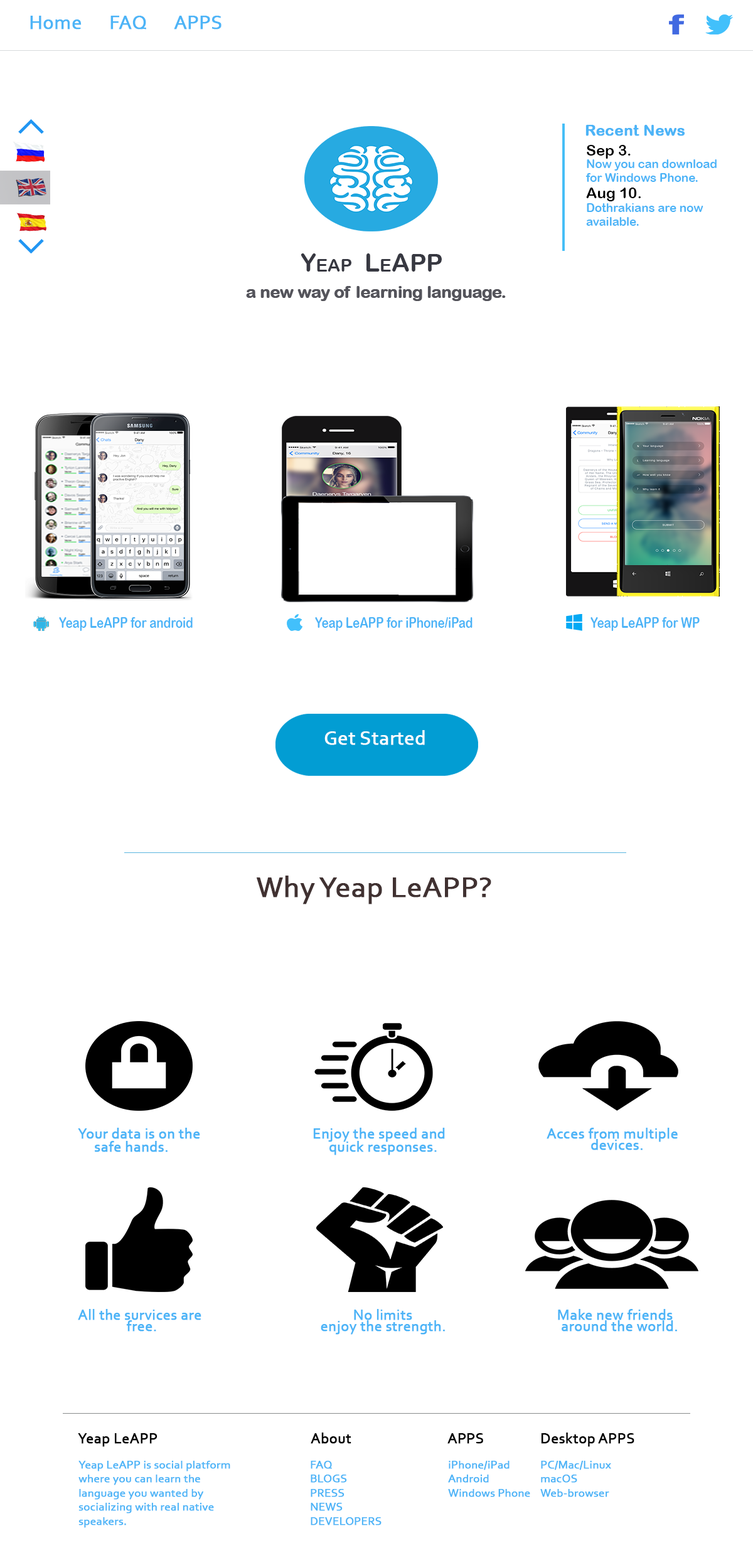
<style>
.page{position:relative;width:753px;height:1568px;background:#ffffff}
.page>*{position:absolute;margin:0}
.t1{font:20.1px "Corbel";color:#4cb4f7;font-weight:bold}
.t2{font:15.1px "ArialRoundedMTBold";color:#4cb4f7;font-weight:bold}
.t3{font:15.1px "ArialRoundedMTBold";color:#000000}
.t4{font:11.7px "ArialRoundedMTBold";color:#4cb4f7}
.t5{font:25.1px "ArialRoundedMTBold";color:#373841;font-variant:small-caps}
.t6{font:16.7px "ArialRoundedMTBold";color:#54545b}
.t7{font:14.9px "ArialRoundedMTBold";color:#4cb4f7;scale:0.79 1}
.t8{font:20.1px "Corbel";color:#ffffff;font-weight:bold}
.t9{font:30.1px "Corbel";color:#403131;font-weight:bold}
.t10{font:15.1px "Corbel";color:#4cb4f7;font-weight:bold}
.t11{font:15.1px "Corbel";color:#000000;font-weight:bold}
.t12{font:11.7px "Corbel";color:#4cb4f7;font-weight:bold}
</style>
<div class="page">
<p class="t1" style="left:30px;top:16px;width:191px;height:13px">Home      FAQ      APPS</p>
<p class="t2" style="left:585px;top:125px;width:100px;height:11px">Recent News</p>
<p class="t3" style="left:586px;top:145px;width:44px;height:14px">Sep 3.</p>
<p class="t4" style="left:585px;top:159px;width:131px;height:23px;text-align:right">Now you can download   for Windows Phone.</p>
<p class="t3" style="left:586px;top:188px;width:54px;height:13px">Aug 10.</p>
<p class="t4" style="left:586px;top:203px;width:117px;height:23px;text-align:right">Dothrakians are now available.</p>
<p class="t5" style="left:300px;top:253px;width:142px;height:19px">Yeap  LeAPP</p>
<p class="t6" style="left:246px;top:286px;width:259px;height:15px">a new way of learning language.</p>
<p class="t6" style="left:246px;top:286px;width:260px;height:15px">a new way of learning language.</p>
<p class="t7" style="left:59px;top:617px;width:134px;height:14px">Yeap LeAPP for android</p>
<p class="t7" style="left:315px;top:617px;width:157px;height:14px">Yeap LeAPP for iPhone/iPad</p>
<p class="t7" style="left:590px;top:617px;width:109px;height:14px">Yeap LeAPP for WP</p>
<p class="t8" style="left:324px;top:730px;width:101px;height:15px">Get Started</p>
<p class="t9" style="left:257px;top:876px;width:234px;height:28px">Why Yeap LeAPP?</p>
<p class="t10" style="left:78px;top:1128px;width:122px;height:11px">Your data is on the</p>
<p class="t10" style="left:313px;top:1128px;width:132px;height:14px">Enjoy the speed and</p>
<p class="t10" style="left:546px;top:1128px;width:131px;height:14px">Acces from multiple</p>
<p class="t10" style="left:95px;top:1141px;width:72px;height:11px">safe hands.</p>
<p class="t10" style="left:329px;top:1141px;width:108px;height:14px">quick responses.</p>
<p class="t10" style="left:591px;top:1139px;width:51px;height:11px">devices.</p>
<p class="t10" style="left:78px;top:1309px;width:123px;height:11px">All the survices are</p>
<p class="t10" style="left:354px;top:1309px;width:58px;height:11px">No limits</p>
<p class="t10" style="left:558px;top:1309px;width:114px;height:11px">Make new friends</p>
<p class="t10" style="left:126px;top:1320px;width:30px;height:12px">free.</p>
<p class="t10" style="left:320px;top:1320px;width:125px;height:15px">enjoy the strength.</p>
<p class="t10" style="left:561px;top:1320px;width:116px;height:12px">around the world.</p>
<p class="t11" style="left:78px;top:1433px;width:79px;height:14px">Yeap LeAPP</p>
<p class="t11" style="left:310px;top:1433px;width:41px;height:11px">About</p>
<p class="t11" style="left:447px;top:1433px;width:36px;height:11px">APPS</p>
<p class="t11" style="left:541px;top:1433px;width:93px;height:14px">Desktop APPS</p>
<p class="t12" style="left:78px;top:1461px;width:152px;height:67px;text-align:right">Yeap LeAPP is social platform<br>where you can learn the <br>language you wanted by <br>socializing with real native<br>speakers.</p>
<p class="t12" style="left:310px;top:1461px;width:71px;height:64px;text-align:right">FAQ<br>BLOGS<br>PRESS<br>NEWS<br>DEVELOPERS</p>
<p class="t12" style="left:448px;top:1461px;width:82px;height:36px;text-align:right">iPhone/iPad<br>Android<br>Windows Phone</p>
<p class="t12" style="left:540px;top:1461px;width:71px;height:36px;text-align:right">PC/Mac/Linux<br>macOS<br>Web-browser</p>
</div>
